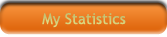
<style>
.page{position:relative;width:167px;height:37px}
.page>*{position:absolute;margin:0}
.t1{font:15px "TrebuchetMS";color:#d1ce7b}
</style>
<div class="page">
<p class="t1" style="left:42px;top:13px;width:84px;height:15px">My Statistics</p>
</div>
